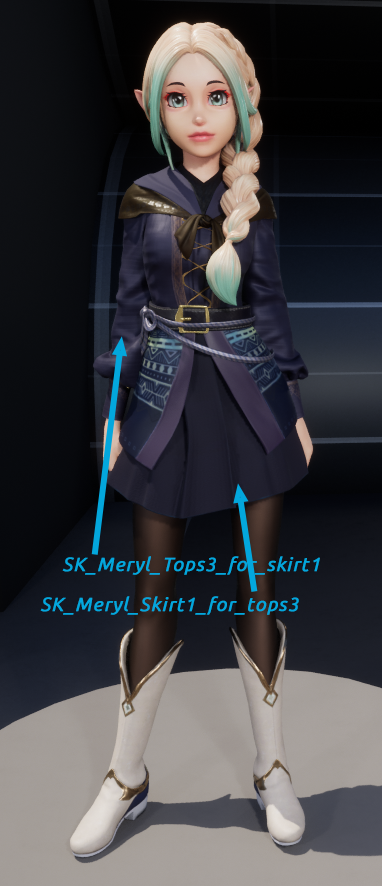
<style>
.page{position:relative;width:382px;height:886px}
.page>*{position:absolute;margin:0}
.t1{font:19.3px "Ubuntu-Italic";letter-spacing:0.03em;color:#03a7dd;font-weight:bold}
</style>
<div class="page">
<p class="t1" style="left:62px;top:556px;width:258px;height:19px">SK_Meryl_Tops3_for_skirt1</p>
<p class="t1" style="left:40px;top:596px;width:259px;height:19px">SK_Meryl_Skirt1_for_tops3</p>
</div>
